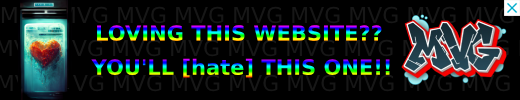
<style>
.page{position:relative;width:520px;height:100px;background:#000000}
.page>*{position:absolute;margin:0}
.t1{font:21px "MontserratRoman-ExtraBold"}
</style>
<div class="page">
<p class="t1" style="left:97px;top:25px;width:285px;height:17px">LOVING THIS WEBSITE??</p>
<p class="t1" style="left:91px;top:58px;width:299px;height:20px">YOU'LL [hate] THIS ONE!!</p>
</div>
